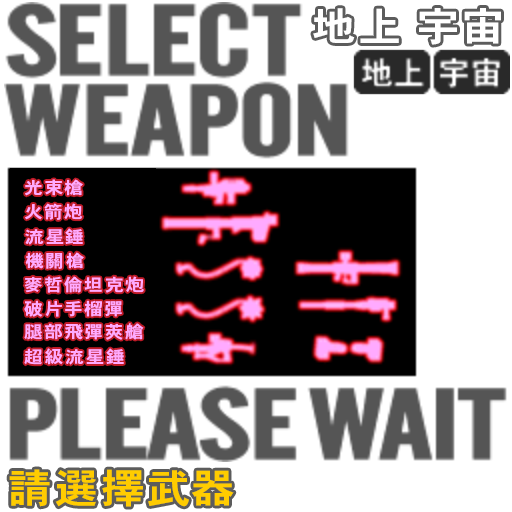
<style>
.page{position:relative;width:512px;height:512px;background:#ffffff}
.page>*{position:absolute;margin:0}
.t1{font:40px "HeiseiKakuGoStd-W7";letter-spacing:0.07em;color:#ffffff;scale:1.09 1}
.t2{font:17px "HeiseiKakuGoStd-W7";letter-spacing:0.1em;color:#ffaaff;scale:1.09 1}
.t3{font:40px "HeiseiKakuGoStd-W7";letter-spacing:0.07em;color:#ffcc00;scale:1.09 1}
</style>
<div class="page">
<p class="t1" style="left:313px;top:8px;width:86px;height:35px">地上</p>
<p class="t1" style="left:419px;top:8px;width:82px;height:37px">宇宙</p>
<p class="t2" style="left:25px;top:179px;width:58px;height:17px">光束槍</p>
<p class="t2" style="left:25px;top:203px;width:58px;height:17px">火箭炮</p>
<p class="t2" style="left:25px;top:228px;width:58px;height:17px">流星錘</p>
<p class="t2" style="left:25px;top:252px;width:59px;height:17px">機關槍</p>
<p class="t2" style="left:24px;top:276px;width:120px;height:17px">麥哲倫坦克炮</p>
<p class="t2" style="left:24px;top:300px;width:98px;height:17px">破片手榴彈</p>
<p class="t2" style="left:24px;top:323px;width:120px;height:17px">腿部飛彈莢艙</p>
<p class="t2" style="left:24px;top:348px;width:100px;height:17px">超級流星錘</p>
<p class="t3" style="left:9px;top:469px;width:225px;height:38px">請選擇武器</p>
</div>
